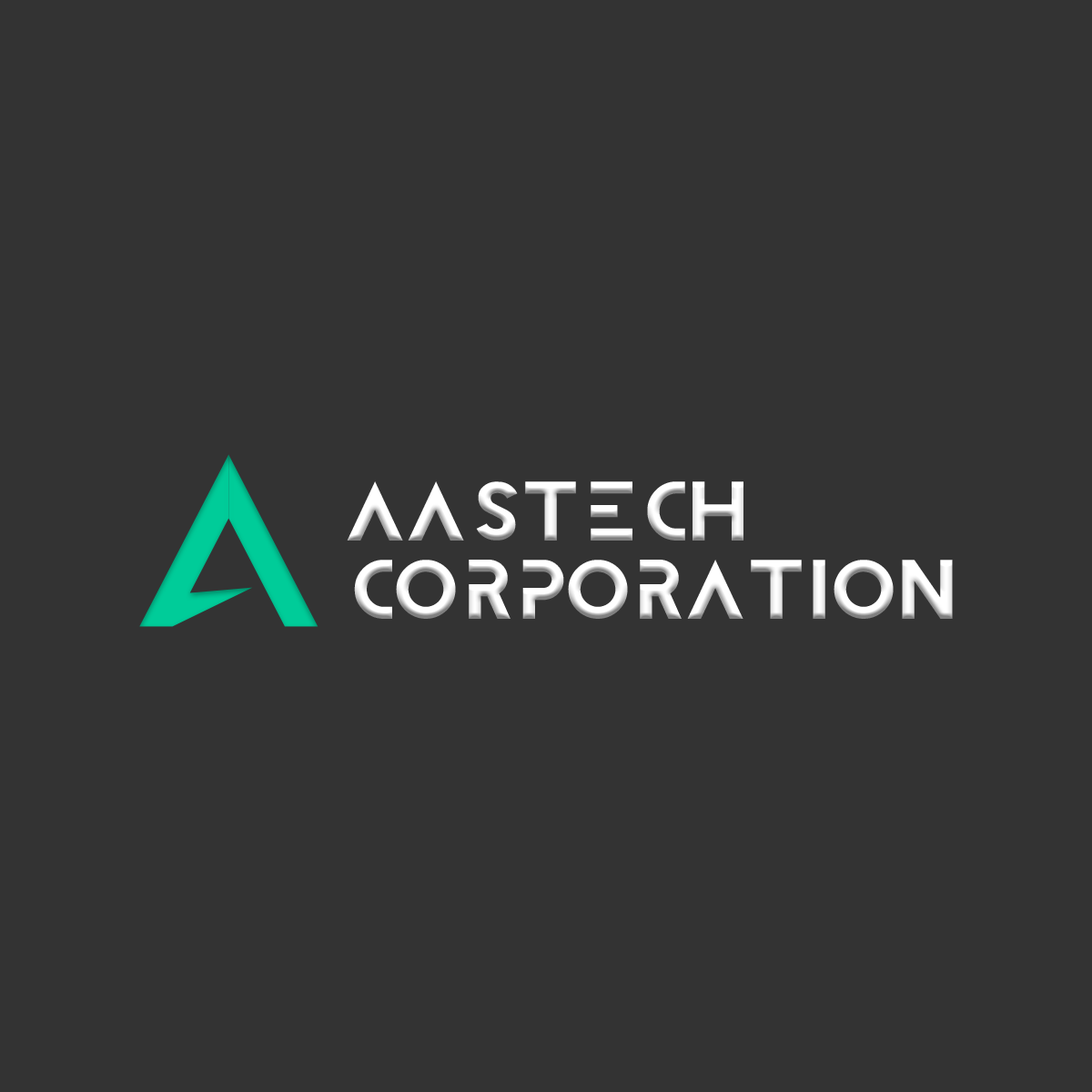
<style>
.page{position:relative;width:1092px;height:1092px;background:#333333}
.page>*{position:absolute;margin:0}
.t1{font:65.5px "BIOWEAPON-Regular";color:#ffffff}
</style>
<div class="page">
<p class="t1" style="left:347px;top:481px;width:606px;height:138px">Aastech Corporation</p>
</div>
